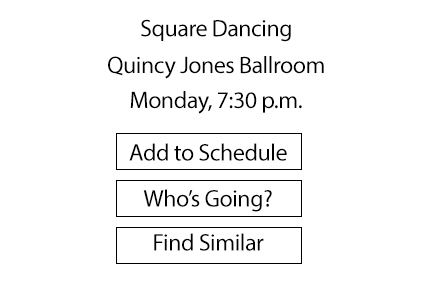
<style>
.page{position:relative;width:432px;height:288px;background:#ffffff}
.page>*{position:absolute;margin:0}
.t1{font:24px "MyriadPro-Regular";letter-spacing:-0.02em;color:#000000}
</style>
<div class="page">
<p class="t1" style="left:141px;top:19px;width:150px;height:23px">Square Dancing</p>
<p class="t1" style="left:108px;top:56px;width:216px;height:23px">Quincy Jones Ballroom</p>
<p class="t1" style="left:130px;top:91px;width:172px;height:23px">Monday, 7:30 p.m.</p>
<p class="t1" style="left:129px;top:143px;width:158px;height:18px">Add to Schedule</p>
<p class="t1" style="left:143px;top:189px;width:129px;height:23px">Who’s Going?</p>
<p class="t1" style="left:154px;top:233px;width:110px;height:18px">Find Similar</p>
</div>
